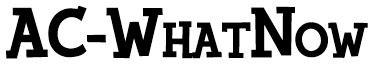
<style>
.page{position:relative;width:374px;height:65px;background:#ffffff}
.page>*{position:absolute;margin:0}
.t1{font:72px "FinkHeavy";letter-spacing:-0.05em;color:#000000;font-variant:small-caps;font-weight:bold}
</style>
<div class="page">
<p class="t1" style="left:6px;top:5px;width:362px;height:54px">AC-WhatNow</p>
</div>
